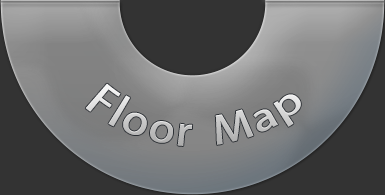
<style>
.page{position:relative;width:385px;height:195px;background:#333333}
.page>*{position:absolute;margin:0}
.t1{font:37.6px "AdobeHeitiStd-Regular"}
</style>
<div class="page">
<p class="t1" style="left:85px;top:83px;width:216px;height:63px">Floor  Map</p>
</div>
